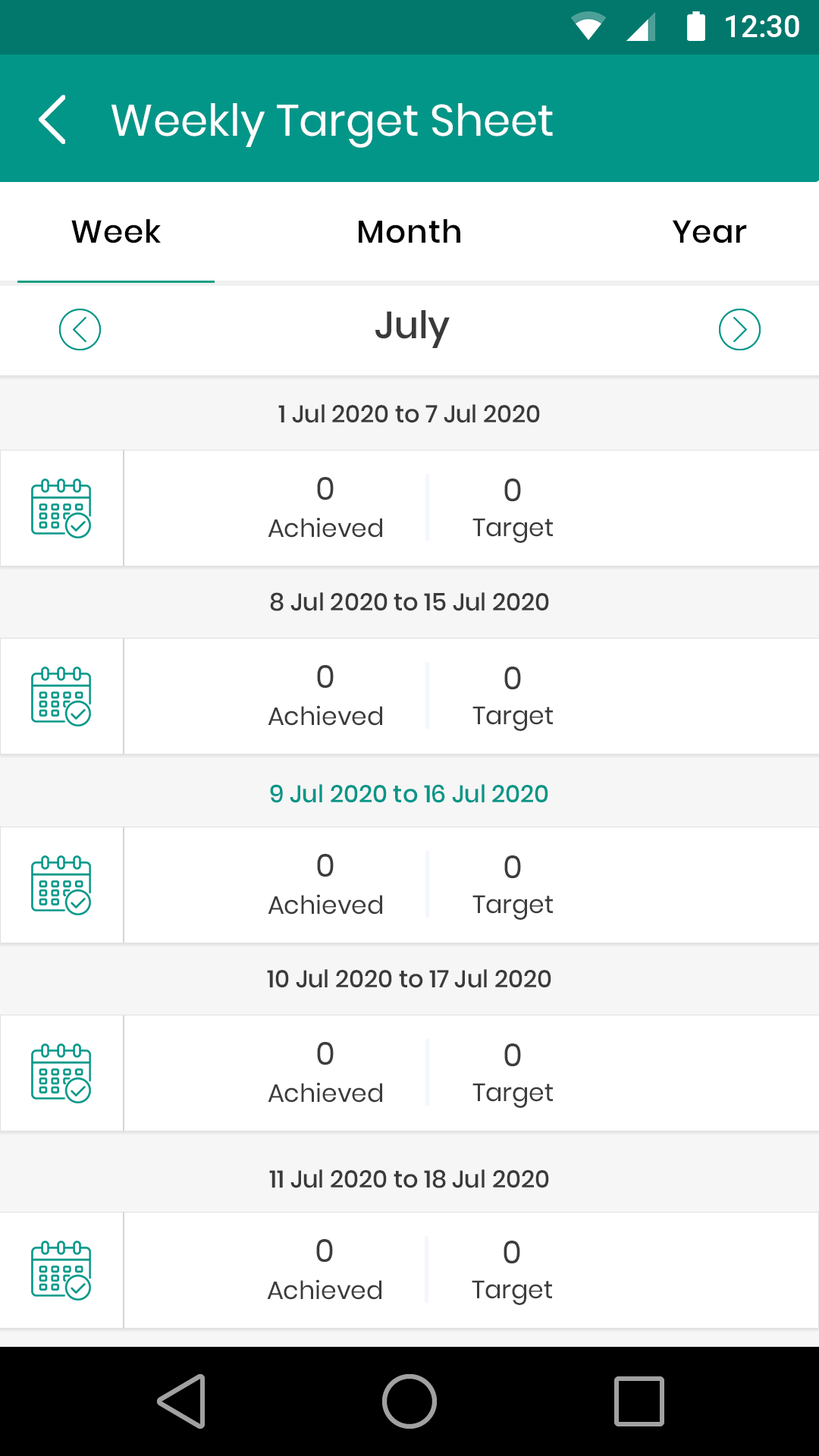
<style>
.page{position:relative;width:819px;height:1456px;background:#ffffff}
.page>*{position:absolute;margin:0}
.t1{font:31.1px "Roboto-Medium";color:#ffffff}
.t2{font:44px "Poppins-Regular";color:#ffffff}
.t3{font:31.7px "Poppins-Medium";letter-spacing:0.025em;color:#000000}
.t4{font:37.9px "Poppins-Medium";color:#3a3a3a}
.t5{font:24.3px "Poppins-Medium";color:#3a3a3a}
.t6{font:31.8px "Poppins-Regular";color:#3c3c3c}
.t7{font:25.1px "Poppins-Regular";color:#3c3c3c}
.t8{font:24.3px "Poppins-Medium";color:#029688}
</style>
<div class="page">
<p class="t1" style="left:726px;top:15px;width:73px;height:22px">12:30</p>
<p class="t2" style="left:111px;top:103px;width:442px;height:45px">Weekly Target Sheet</p>
<p class="t3" style="left:71px;top:219px;width:90px;height:24px">Week</p>
<p class="t3" style="left:359px;top:219px;width:101px;height:24px">Month</p>
<p class="t3" style="left:672px;top:220px;width:75px;height:23px">Year</p>
<p class="t4" style="left:375px;top:310px;width:75px;height:38px">July</p>
<p class="t5" style="left:278px;top:404px;width:262px;height:19px">1 Jul 2020 to 7 Jul 2020</p>
<p class="t6" style="left:317px;top:477px;width:17px;height:23px">0</p>
<p class="t6" style="left:504px;top:479px;width:17px;height:22px">0</p>
<p class="t7" style="left:268px;top:517px;width:114px;height:21px">Achieved</p>
<p class="t7" style="left:472px;top:518px;width:81px;height:25px">Target</p>
<p class="t5" style="left:270px;top:592px;width:279px;height:19px">8 Jul 2020 to 15 Jul 2020</p>
<p class="t6" style="left:317px;top:665px;width:17px;height:23px">0</p>
<p class="t6" style="left:504px;top:667px;width:17px;height:22px">0</p>
<p class="t7" style="left:268px;top:705px;width:114px;height:21px">Achieved</p>
<p class="t7" style="left:472px;top:706px;width:81px;height:25px">Target</p>
<p class="t8" style="left:270px;top:784px;width:278px;height:19px">9 Jul 2020 to 16 Jul 2020</p>
<p class="t6" style="left:317px;top:854px;width:17px;height:23px">0</p>
<p class="t6" style="left:504px;top:855px;width:17px;height:23px">0</p>
<p class="t7" style="left:268px;top:894px;width:114px;height:21px">Achieved</p>
<p class="t7" style="left:472px;top:895px;width:81px;height:25px">Target</p>
<p class="t5" style="left:267px;top:969px;width:284px;height:19px">10 Jul 2020 to 17 Jul 2020</p>
<p class="t6" style="left:317px;top:1042px;width:17px;height:23px">0</p>
<p class="t6" style="left:504px;top:1043px;width:17px;height:23px">0</p>
<p class="t7" style="left:268px;top:1082px;width:114px;height:21px">Achieved</p>
<p class="t7" style="left:472px;top:1083px;width:81px;height:25px">Target</p>
<p class="t5" style="left:269px;top:1169px;width:280px;height:19px">11 Jul 2020 to 18 Jul 2020</p>
<p class="t6" style="left:316px;top:1239px;width:17px;height:23px">0</p>
<p class="t6" style="left:504px;top:1241px;width:16px;height:22px">0</p>
<p class="t7" style="left:267px;top:1279px;width:114px;height:21px">Achieved</p>
<p class="t7" style="left:472px;top:1280px;width:80px;height:25px">Target</p>
</div>
